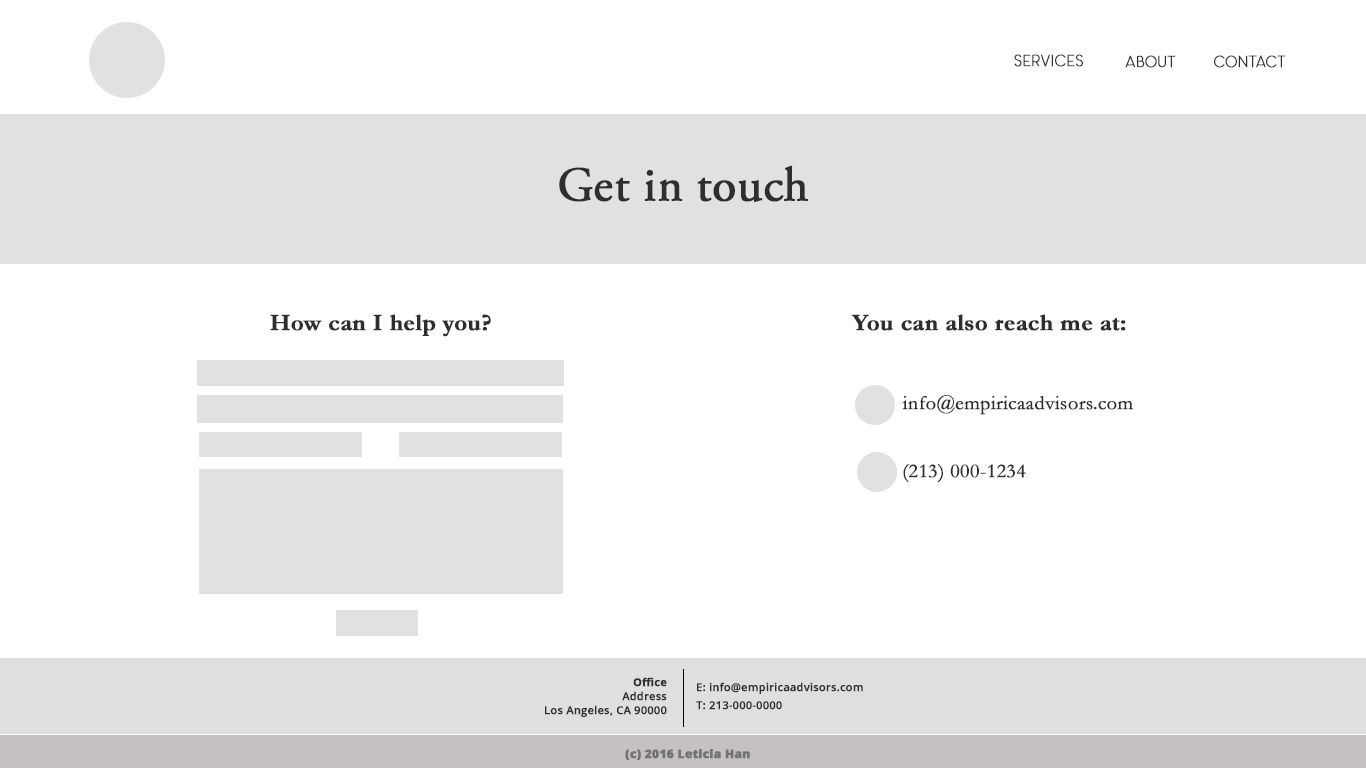
<style>
.page{position:relative;width:1366px;height:768px;background:#ffffff}
.page>*{position:absolute;margin:0}
.t1{font:16px "Panama-Light";color:#2e2e2e;font-weight:bold}
.t2{font:16.2px "Panama-Light";color:#2e2e2e;font-weight:bold}
.t3{font:48px "AGaramondPro-Regular";color:#2e2e2e;font-weight:bold}
.t4{font:24px "Garamond-Bold";color:#2e2e2e;font-weight:bold}
.t5{font:20px "Garamond";color:#2e2e2e;font-weight:bold}
.t6{font:11px/14px "OpenSans-Semibold";color:#2e2e2e;font-weight:bold}
.t7{font:11px/14px "OpenSans-Bold";color:#2e2e2e;font-weight:bold}
.t8{font:11px/18px "OpenSans-Semibold";color:#2e2e2e;font-weight:bold}
.t9{font:12px "OpenSans-Extrabold";color:#737272;font-weight:bold}
</style>
<div class="page">
<p class="t1" style="left:1014px;top:54px;width:69px;height:13px">Services</p>
<p class="t1" style="left:1125px;top:55px;width:51px;height:13px">About</p>
<p class="t2" style="left:1214px;top:55px;width:72px;height:13px">Contact</p>
<p class="t3" style="left:559px;top:165px;width:249px;height:37px">Get in touch</p>
<p class="t4" style="left:270px;top:314px;width:221px;height:23px">How can I help you?</p>
<p class="t4" style="left:851px;top:314px;width:275px;height:17px">You can also reach me at:</p>
<p class="t5" style="left:902px;top:395px;width:231px;height:20px">info@empiricaadvisors.com</p>
<p class="t5" style="left:903px;top:464px;width:123px;height:19px">(213) 000-1234</p>
<p class="t6" style="left:545px;top:677px;width:122px;height:40px;text-align:right"><span class="t7">Office<br></span>Address<br>Los Angeles, CA 90000</p>
<p class="t8" style="left:696px;top:682px;width:167px;height:28px">E: info@empiricaadvisors.com<br>T: 213-000-0000</p>
<p class="t9" style="left:625px;top:749px;width:125px;height:11px">(c) 2016 Leticia Han</p>
</div>
